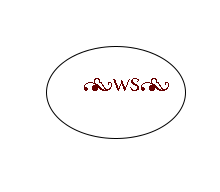
<style>
.page{position:relative;width:220px;height:192px;background:#ffffff}
.page>*{position:absolute;margin:0}
.t1{font:18px "MyanmarMN";color:#660000}
.t2{font:18px "HoeflerText-Ornaments";color:#660000}
</style>
<div class="page">
<p class="t1" style="left:84px;top:78px;width:85px;height:13px"><span class="t2">S</span>WS<span class="t2">S</span></p>
</div>
